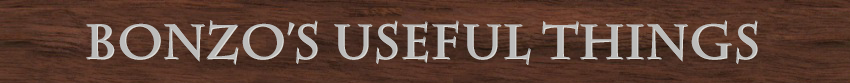
<style>
.page{position:relative;width:850px;height:83px}
.page>*{position:absolute;margin:0}
.t1{font:48px "CharlemagneStd-Bold";color:#bcbcbb}
</style>
<div class="page">
<p class="t1" style="left:86px;top:20px;width:671px;height:44px">Bonzo’s Useful Things</p>
<p class="t1" style="left:87px;top:21px;width:671px;height:44px">Bonzo’s Useful Things</p>
</div>
